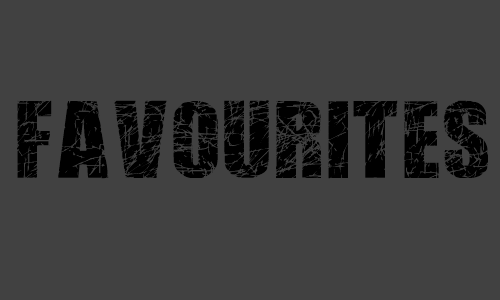
<style>
.page{position:relative;width:500px;height:300px;background:#414141}
.page>*{position:absolute;margin:0}
.t1{font:110px "ScratchedLetters";color:#000000}
</style>
<div class="page">
<p class="t1" style="left:17px;top:100px;width:471px;height:79px">FAVOURITES</p>
</div>
